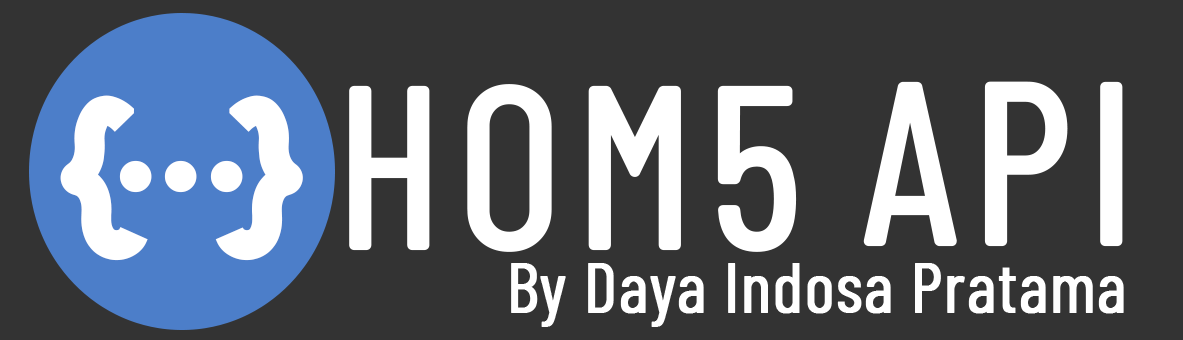
<style>
.page{position:relative;width:1183px;height:340px;background:#333333}
.page>*{position:absolute;margin:0}
.t1{font:225.8px "BarlowCondensed-Regular";letter-spacing:0.04em;color:#ffffff;font-weight:bold}
.t2{font:225.8px "Jalan-Panjang";color:#ffffff;font-weight:bold}
.t3{font:70.6px "BarlowCondensed-Regular";color:#ffffff;font-weight:bold}
</style>
<div class="page">
<p class="t1" style="left:349px;top:84px;width:448px;height:168px">HOM5</p>
<p class="t1" style="left:863px;top:81px;width:260px;height:166px">API</p>
<p class="t2" style="left:60px;top:95px;width:88px;height:166px">{</p>
<p class="t2" style="left:215px;top:95px;width:88px;height:166px">}</p>
<p class="t2" style="left:119px;top:160px;width:124px;height:33px">...</p>
<p class="t3" style="left:511px;top:263px;width:613px;height:64px">By Daya Indosa Pratama</p>
</div>
